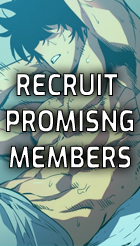
<style>
.page{position:relative;width:140px;height:246px}
.page>*{position:absolute;margin:0}
.t1{font:30.1px "ExoRoman-ExtraBold";scale:0.85 1}
</style>
<div class="page">
<p class="t1" style="left:6px;top:73px;width:128px;height:96px;text-align:center">RECRUIT <br>PROMISNG<br>MEMBERS</p>
</div>
